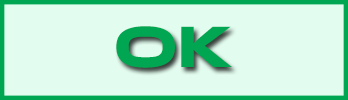
<style>
.page{position:relative;width:348px;height:100px;background:#e2fcef}
.page>*{position:absolute;margin:0}
.t1{font:60px "EthnocentricRg-Regular";color:#00a651}
</style>
<div class="page">
<p class="t1" style="left:116px;top:26px;width:116px;height:42px">OK</p>
</div>
